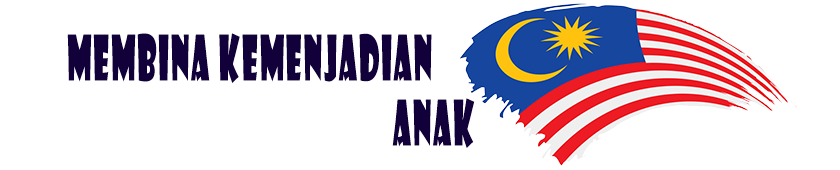
<style>
.page{position:relative;width:840px;height:170px;background:#ffffff}
.page>*{position:absolute;margin:0}
.t1{font:61.2px "ShowcardGothic-Reg";letter-spacing:0.06em;color:#12003a;font-variant:small-caps;scale:0.48 1}
</style>
<div class="page">
<p class="t1" style="left:67px;top:33px;width:365px;height:50px">MEMBINA KEMENJADIAN</p>
<p class="t1" style="left:392px;top:98px;width:83px;height:50px">ANAK</p>
</div>
